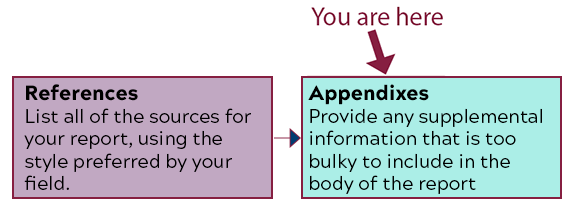
<style>
.page{position:relative;width:588px;height:216px;background:#ffffff}
.page>*{position:absolute;margin:0}
.t1{font:18.8px "AcherusGrotesqueRegular";color:#000000}
.t2{font:20.8px "AcherusGrotesqueBlack";color:#000000}
</style>
<div class="page">
<p class="t1" style="left:24px;top:84px;width:227px;height:106px"><span class="t2">References<br></span>List all of the sources for <br>your report, using the <br>style preferred by your <br>field.</p>
<p class="t1" style="left:308px;top:84px;width:234px;height:110px"><span class="t2">Appendixes<br></span>Provide any supplemental <br>information that is too <br>bulky to include in the <br>body of the report</p>
</div>
